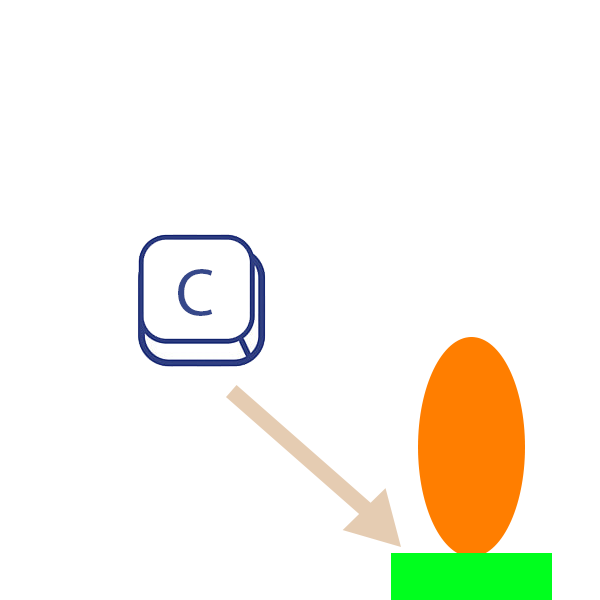
<style>
.page{position:relative;width:600px;height:600px;background:#ffffff}
.page>*{position:absolute;margin:0}
.t1{font:66.7px "MyriadPro-Regular";color:#36488a}
</style>
<div class="page">
<p class="t1" style="left:178px;top:269px;width:35px;height:47px">C</p>
</div>
